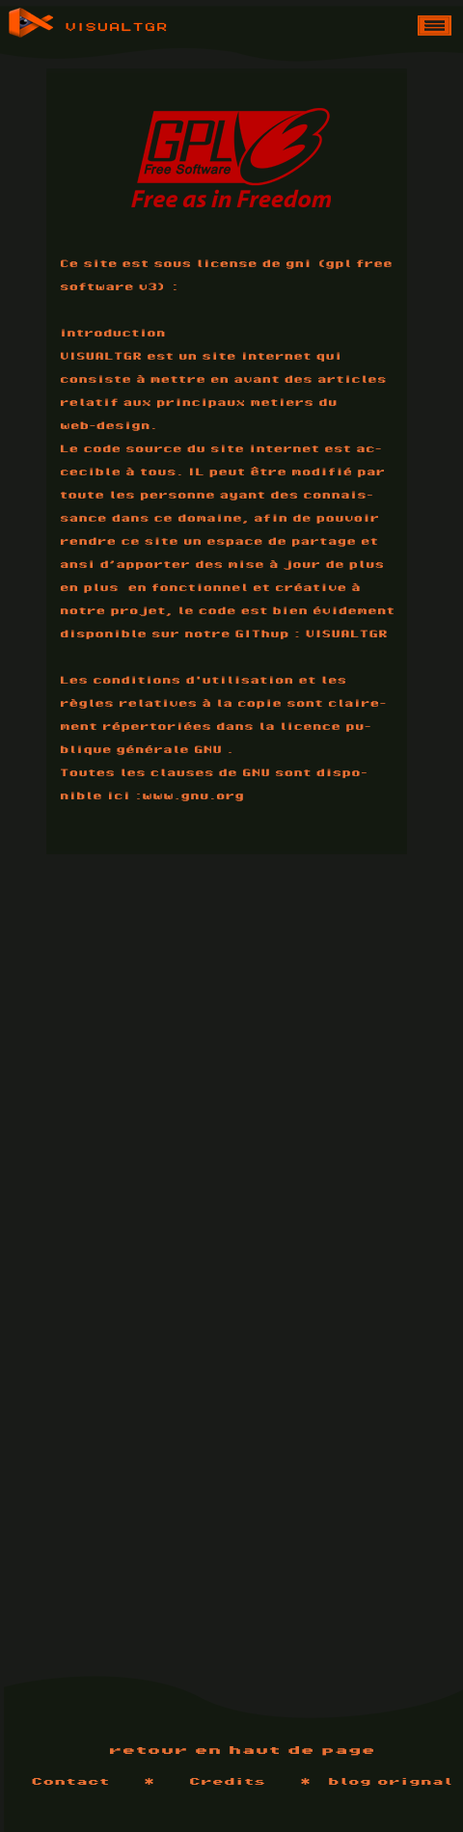
<style>
.page{position:relative;width:463px;height:1832px;background:#191b18}
.page>*{position:absolute;margin:0}
.t1{font:9px "PixelOperator8";color:#ff5600;scale:1.5 1}
.t2{font:12.5px/23.1px "PixelOperatorHB";color:#ea7235;scale:1.5 1}
.t3{font:7.7px/17.4px "PixelOperator8-Bold";color:#ea7235;scale:1.5 1}
.t4{font:7.7px "PixelOperator8-Bold";color:#ea7235;scale:1.5 1}
.t5{font:9px "PixelOperator8-Bold";color:#ea7235;scale:1.5 1}
</style>
<div class="page">
<p class="t1" style="left:66px;top:22px;width:101px;height:10px">VISUALTGR</p>
<p class="t2" style="left:61px;top:259px;width:332px;height:542px"><span class="t3"><br></span>Ce site est sous license de gni (gpl free software v3) :<br><br>introduction<br>VISUALTGR est un site internet qui consiste à mettre en avant des articles relatif aux principaux metiers du web-design. <br>Le code source du site internet est accecible à tous. IL peut être modifié par toute les personne ayant des connaissance dans ce domaine, afin de pouvoir rendre ce site un espace de partage et ansi d’apporter des mise à jour de plus en plus  en fonctionnel et créative à notre projet, le code est bien évidement <br>disponible sur notre GIThup : VISUALTGR <br>  <br>Les conditions d'utilisation et les règles relatives à la copie sont clairement répertoriées dans la licence publique générale GNU .<br>Toutes les clauses de GNU sont disponible ici :www.gnu.org</p>
<p class="t4" style="left:32px;top:1746px;width:419px;height:40px;text-align:center"><span class="t5">retour en haut de page<br><br> <br></span>Contact      *      Credits      *   blog orignal</p>
</div>
